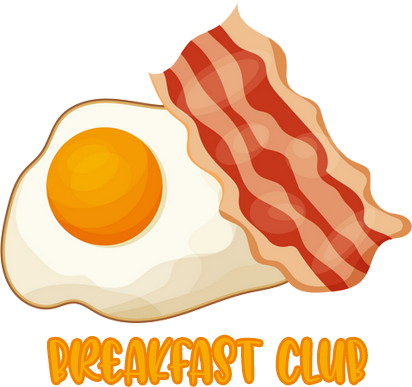
<style>
.page{position:relative;width:412px;height:387px;background:#ffffff}
.page>*{position:absolute;margin:0}
.t1{font:60px "AvocadoCreamy";color:#f6ab00}
</style>
<div class="page">
<p class="t1" style="left:50px;top:337px;width:315px;height:47px">Breakfast Club</p>
</div>
